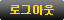
<style>
.page{position:relative;width:64px;height:20px}
.page>*{position:absolute;margin:0}
.t1{font:12px "morris9";letter-spacing:-0.05em;color:#ffd800;font-weight:bold}
</style>
<div class="page">
<p class="t1" style="left:10px;top:5px;width:44px;height:10px">로그아웃</p>
</div>
